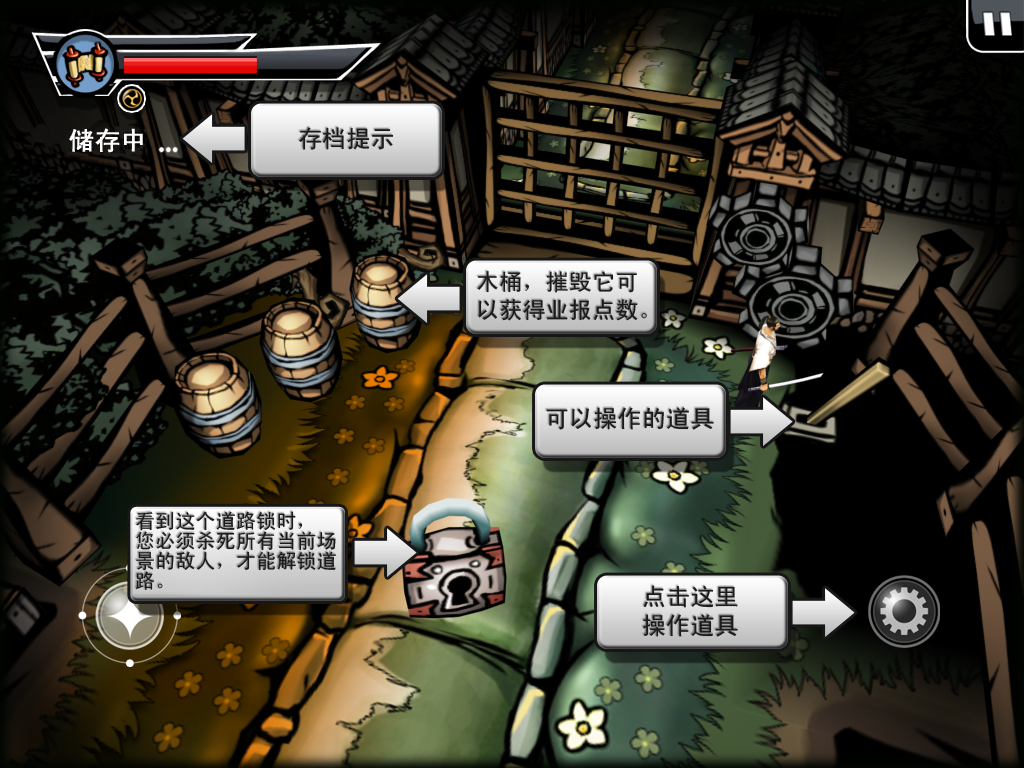
<style>
.page{position:relative;width:1024px;height:768px}
.page>*{position:absolute;margin:0}
.t1{font:25px "SimHei";letter-spacing:0.01em;color:#ffffff;font-weight:bold}
.t2{font:24px "SimHei";letter-spacing:0.01em;color:#1b1b1b}
.t3{font:23px "SimHei";letter-spacing:0.01em;color:#1b1b1b}
.t4{font:20px/20px "SimHei";letter-spacing:0.01em;color:#1b1b1b}
</style>
<div class="page">
<p class="t1" style="left:69px;top:128px;width:74px;height:25px">储存中</p>
<p class="t2" style="left:299px;top:127px;width:95px;height:23px">存档提示</p>
<p class="t3" style="left:477px;top:271px;width:170px;height:50px">木桶，摧毁它可<br>以获得业报点数。</p>
<p class="t2" style="left:546px;top:407px;width:168px;height:23px">可以操作的道具</p>
<p class="t4" style="left:136px;top:511px;width:200px;height:79px">看到这个道路锁时，<br>您必须杀死所有当前场<br>景的敌人，才能解锁道<br>路。</p>
<p class="t2" style="left:643px;top:585px;width:95px;height:52px">点击这里<br>操作道具</p>
</div>
